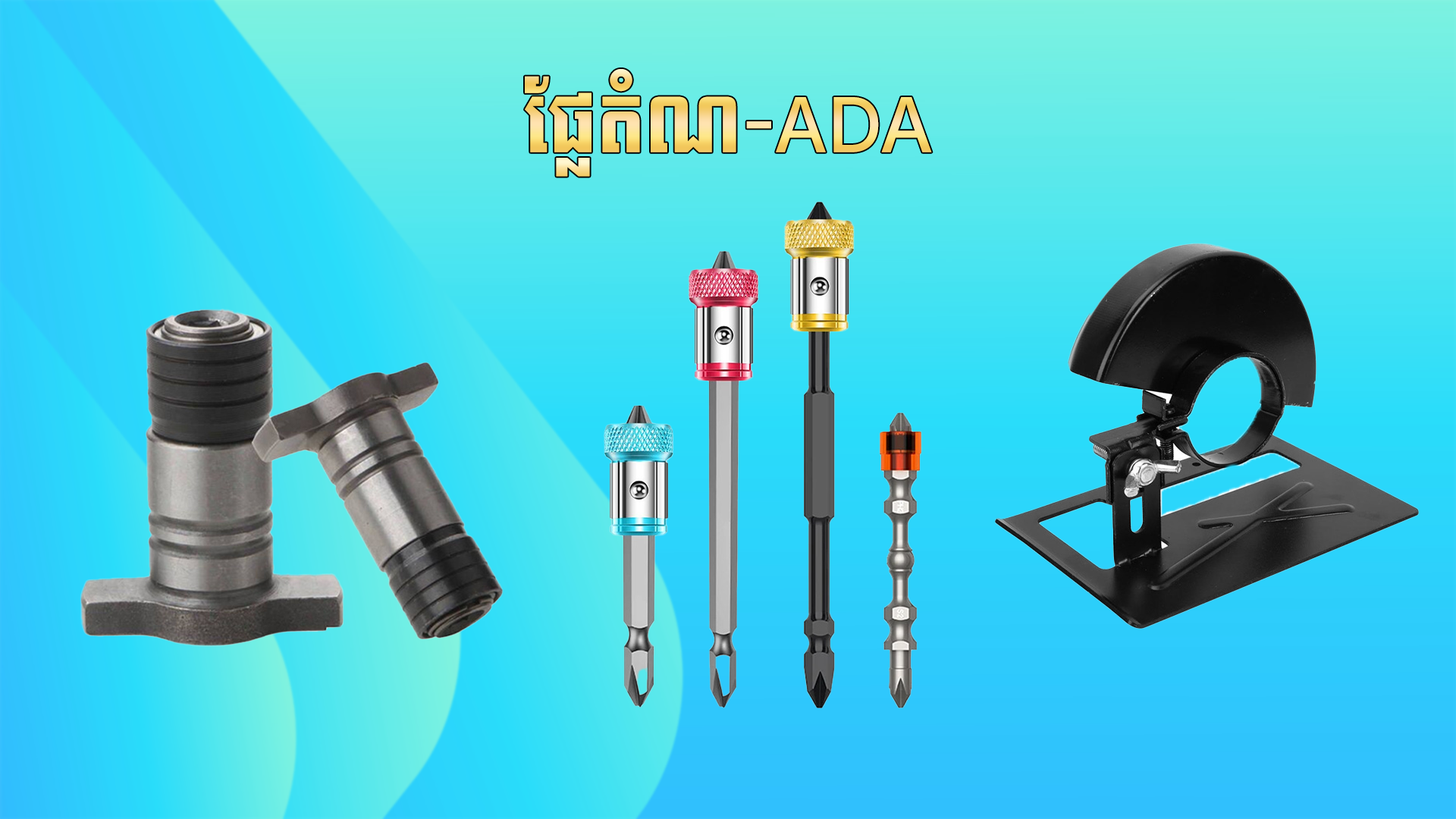
<style>
.page{position:relative;width:1456px;height:819px}
.page>*{position:absolute;margin:0}
.t1{font:75.8px "Kh-Koulen"}
.t2{font:75.8px "Inter-Medium"}
</style>
<div class="page">
<p class="t1" style="left:525px;top:69px;width:407px;height:108px">ផ្លែតំណ<span class="t2">-ADA</span></p>
</div>
